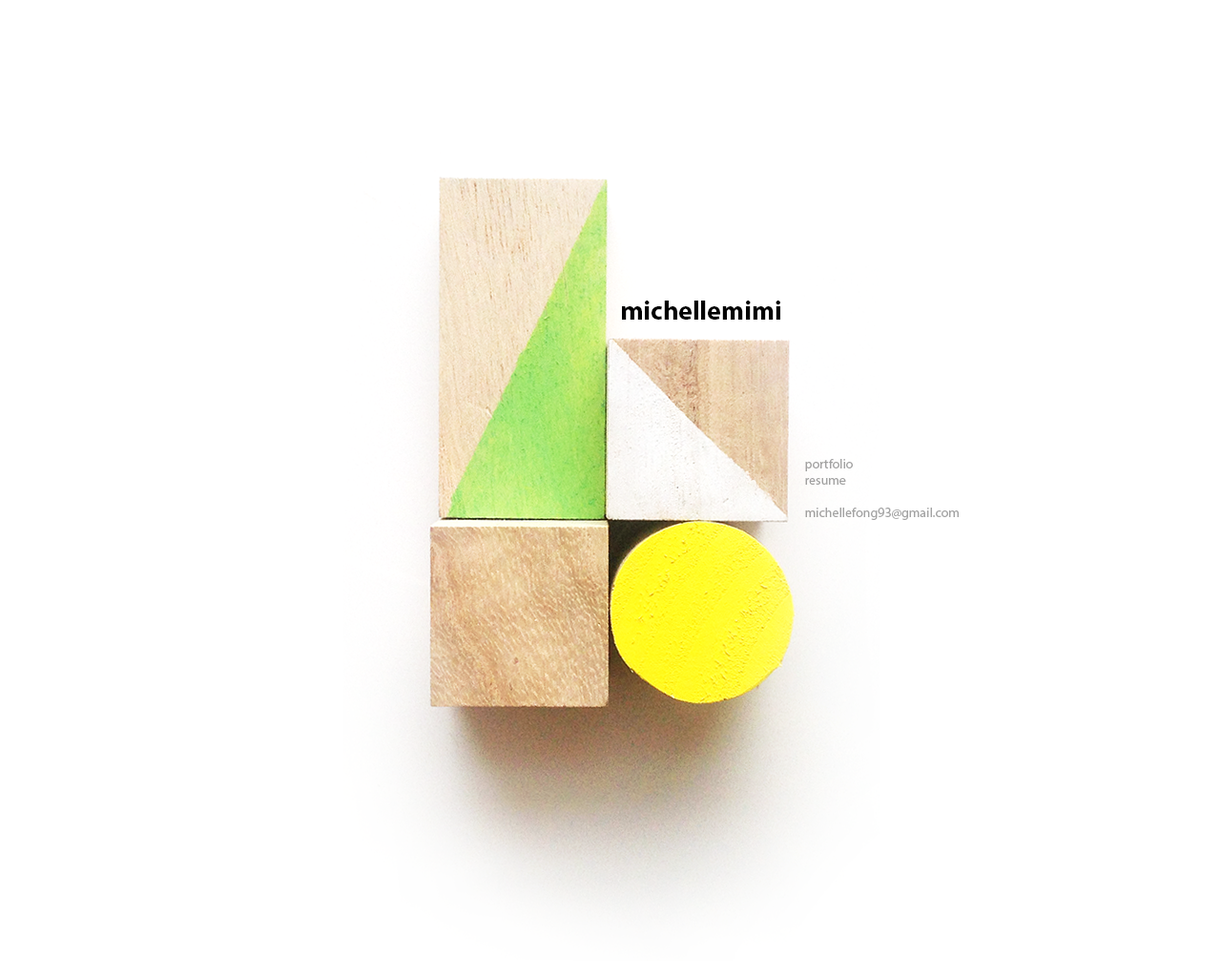
<style>
.page{position:relative;width:1221px;height:977px;background:#ffffff}
.page>*{position:absolute;margin:0}
.t1{font:26.7px "MyriadPro-Bold";color:#000000}
.t2{font:13.4px "MyriadPro-Regular";color:#a3a3a2}
</style>
<div class="page">
<p class="t1" style="left:622px;top:300px;width:158px;height:20px">michellemimi</p>
<p class="t2" style="left:805px;top:459px;width:154px;height:61px">portfolio<br>resume<br><br>michellefong93@gmail.com</p>
</div>
